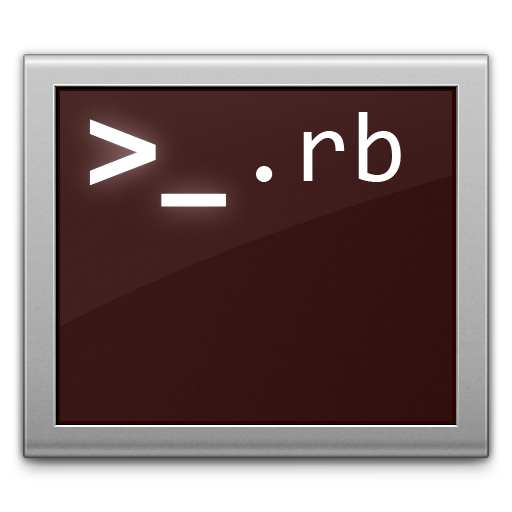
<style>
.page{position:relative;width:512px;height:512px;background:#ffffff}
.page>*{position:absolute;margin:0}
.t1{font:100px "Consolas";letter-spacing:0.02em;color:#ffffff}
</style>
<div class="page">
<p class="t1" style="left:256px;top:112px;width:145px;height:70px">.rb</p>
</div>
